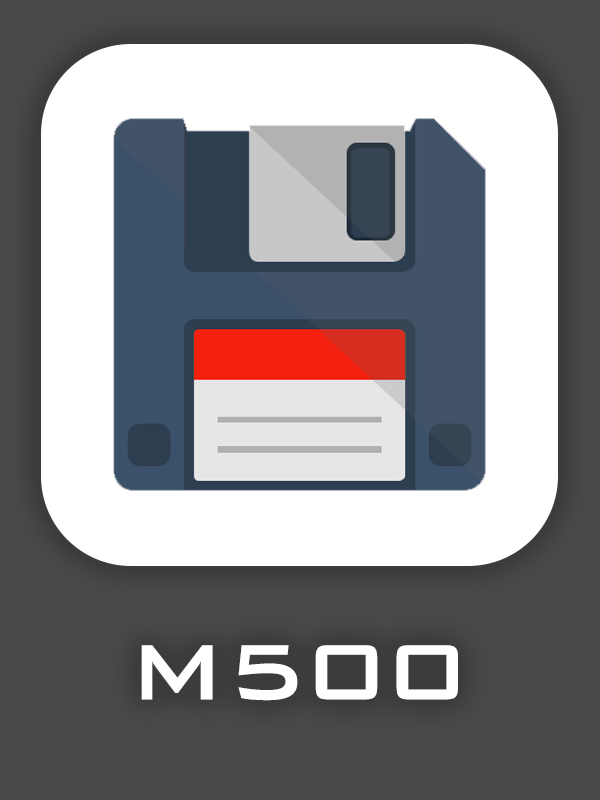
<style>
.page{position:relative;width:600px;height:800px;background:#ffffff}
.page>*{position:absolute;margin:0}
.t1{font:104.6px "BankGothicBT-Medium";color:#ffffff}
</style>
<div class="page">
<p class="t1" style="left:141px;top:645px;width:317px;height:56px">M500</p>
</div>
